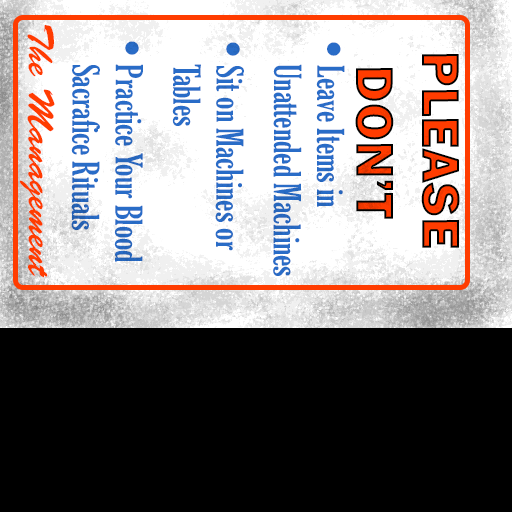
<style>
.page{position:relative;width:512px;height:512px;background:#000000}
.page>*{position:absolute;margin:0}
.t1{font:36px "BrushScriptStd";color:#ff3c00}
.t2{font:36px "GloucesterMT-ExtraCondensed";color:#296cc7}
.t3{font:48px "FranklinGothic-Heavy";color:#296cc7}
.t4{font:55px "FranklinGothic-Heavy"}
</style>
<div class="page">
<p class="t1" style="left:19px;top:25px;width:36px;height:253px;rotate:90deg">The Management</p>
<p class="t2" style="left:71px;top:41px;width:274px;height:235px;rotate:90deg"><span class="t3">•</span>Leave Items in <br>     Unattended Machines<br><span class="t3">•</span>Sit on Machines or <br>     Tables<br><span class="t3">•</span>Practice Your Blood <br>     Sacrafice Rituals</p>
<p class="t4" style="left:355px;top:54px;width:105px;height:194px;rotate:90deg">PLEASE <br> DON’T</p>
</div>
